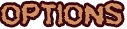
<style>
.page{position:relative;width:127px;height:29px;background:#3b080d}
.page>*{position:absolute;margin:0}
.t1{font:28px "TOBACCO";color:#c4845a;font-weight:bold}
</style>
<div class="page">
<p class="t1" style="left:1px;top:3px;width:121px;height:22px">OPTIONS</p>
</div>
